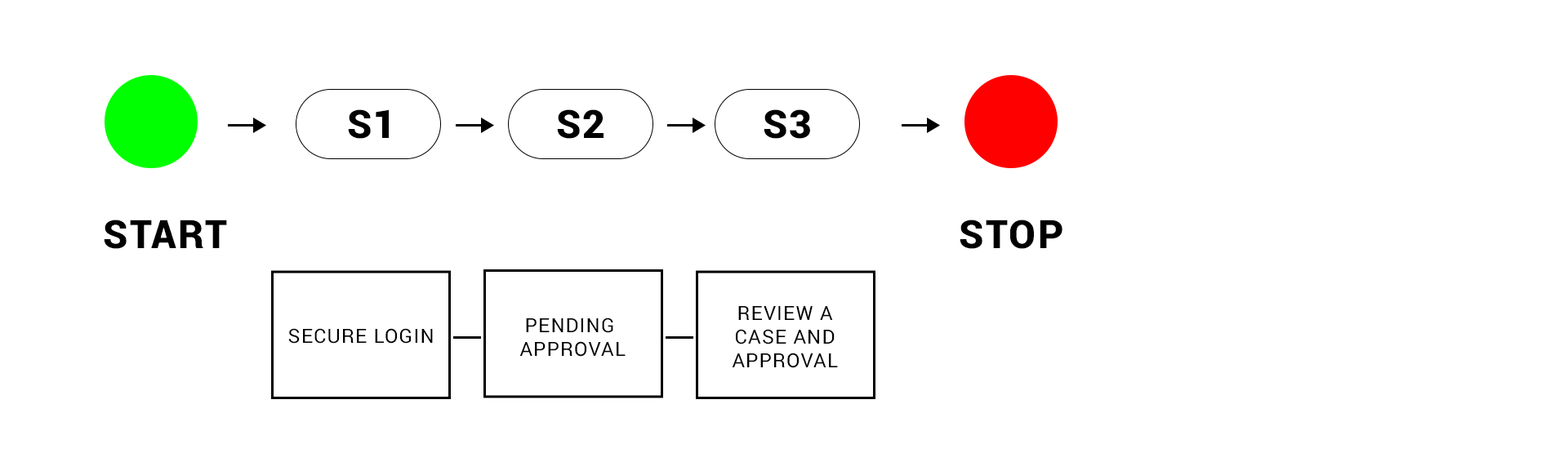
<style>
.page{position:relative;width:1568px;height:453px;background:#ffffff}
.page>*{position:absolute;margin:0}
.t1{font:39.2px "Roboto-Black";letter-spacing:0.05em;color:#000000}
.t2{font:19.6px "Roboto-Regular";letter-spacing:0.05em;color:#000000}
</style>
<div class="page">
<p class="t1" style="left:348px;top:109px;width:41px;height:30px">S1</p>
<p class="t1" style="left:557px;top:109px;width:47px;height:30px">S2</p>
<p class="t1" style="left:764px;top:109px;width:46px;height:30px">S3</p>
<p class="t1" style="left:104px;top:220px;width:123px;height:29px">START</p>
<p class="t1" style="left:960px;top:220px;width:102px;height:29px">STOP</p>
<p class="t2" style="left:519px;top:318px;width:107px;height:39px;text-align:center">PENDING <br>APPROVAL</p>
<p class="t2" style="left:732px;top:306px;width:106px;height:62px;text-align:center">REVIEW A<br>CASE AND<br>APPROVAL</p>
<p class="t2" style="left:288px;top:328px;width:145px;height:16px">SECURE LOGIN</p>
</div>
